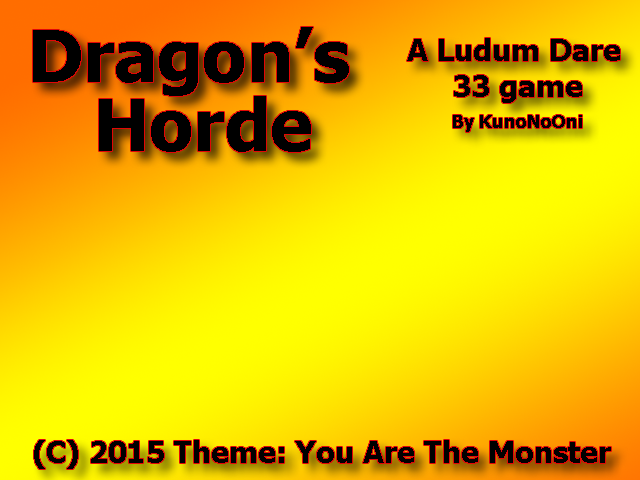
<style>
.page{position:relative;width:640px;height:480px}
.page>*{position:absolute;margin:0}
.t1{font:72px "Tahoma-Bold";color:#000000}
.t2{font:30px "Tahoma-Bold";color:#000000}
.t3{font:18px "Tahoma-Bold";color:#000000}
</style>
<div class="page">
<p class="t1" style="left:33px;top:27px;width:316px;height:69px">Dragon’s</p>
<p class="t2" style="left:407px;top:38px;width:213px;height:65px">A Ludum Dare<br>     33 game</p>
<p class="t1" style="left:99px;top:96px;width:212px;height:56px">Horde</p>
<p class="t3" style="left:453px;top:115px;width:129px;height:17px">By KunoNoOni</p>
<p class="t2" style="left:34px;top:440px;width:577px;height:29px">(C) 2015 Theme: You Are The Monster</p>
</div>
